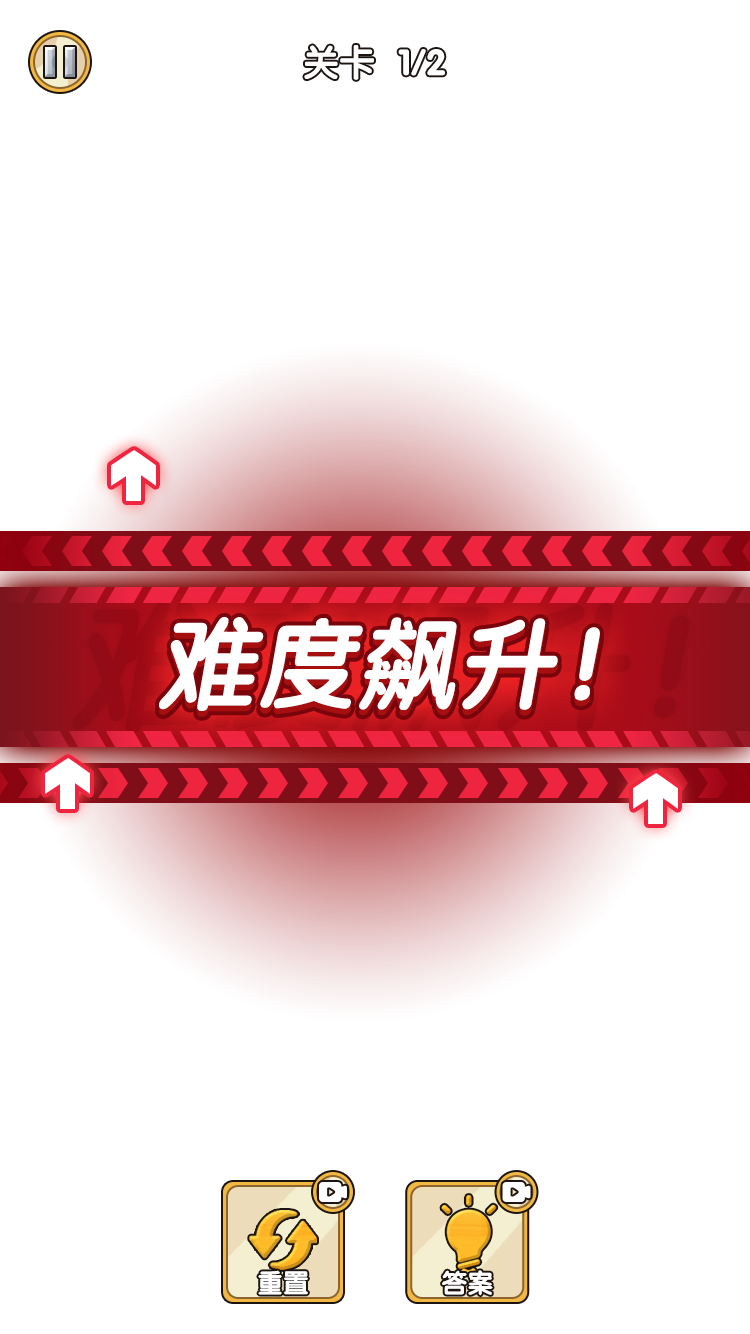
<style>
.page{position:relative;width:750px;height:1334px;background:#ffffff}
.page>*{position:absolute;margin:0}
.t1{font:36px "FZY4JW--GB1-0";color:#ffffff}
.t2{font:100px "FZY4JW--GB1-0";color:#ffffff;font-style:italic}
.t3{font:100px "FZY4JW--GB1-0";font-style:italic}
.t4{font:26px "FZY4JW--GB1-0";color:#ffffff}
</style>
<div class="page">
<p class="t1" style="left:304px;top:45px;width:70px;height:35px">关卡</p>
<p class="t1" style="left:398px;top:49px;width:47px;height:27px">1/2</p>
<p class="t2" style="left:159px;top:616px;width:441px;height:95px">难度飙升！</p>
<p class="t3" style="left:159px;top:622px;width:441px;height:95px">难度飙升！</p>
<p class="t4" style="left:258px;top:1270px;width:50px;height:25px">重置</p>
<p class="t4" style="left:442px;top:1270px;width:51px;height:26px">答案</p>
</div>
